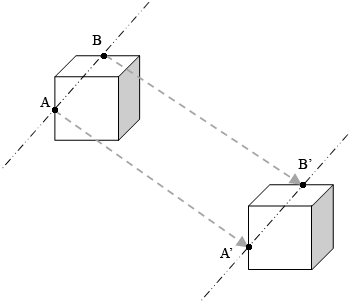
<style>
.page{position:relative;width:351px;height:303px;background:#ffffff}
.page>*{position:absolute;margin:0}
.t1{font:14px "TimesNewRomanPSMT";color:#020202}
</style>
<div class="page">
<p class="t1" style="left:92px;top:35px;width:10px;height:10px">B</p>
<p class="t1" style="left:40px;top:97px;width:11px;height:10px">A</p>
<p class="t1" style="left:298px;top:159px;width:14px;height:10px">B’</p>
<p class="t1" style="left:220px;top:248px;width:13px;height:10px">A’</p>
</div>
